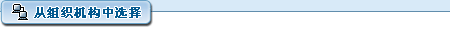
<style>
.page{position:relative;width:450px;height:36px;background:#ffffff}
.page>*{position:absolute;margin:0}
.t1{font:12px "SimSun";letter-spacing:0.05em;color:#03598f;font-weight:bold}
</style>
<div class="page">
<p class="t1" style="left:34px;top:7px;width:107px;height:11px">从组织机构中选择</p>
</div>
